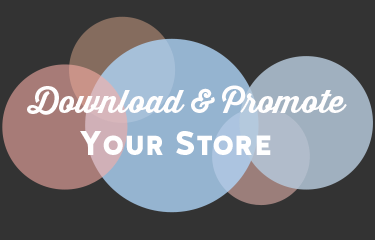
<style>
.page{position:relative;width:375px;height:240px;background:#333333}
.page>*{position:absolute;margin:0}
.t1{font:32.1px "ThirstyScript-Bold";color:#fffefe}
.t2{font:33.2px "HalisGR-SBlack";color:#ffffff}
</style>
<div class="page">
<p class="t1" style="left:27px;top:85px;width:320px;height:30px">Download &amp; Promote</p>
<p class="t2" style="left:80px;top:131px;width:191px;height:24px">Your Store</p>
</div>
